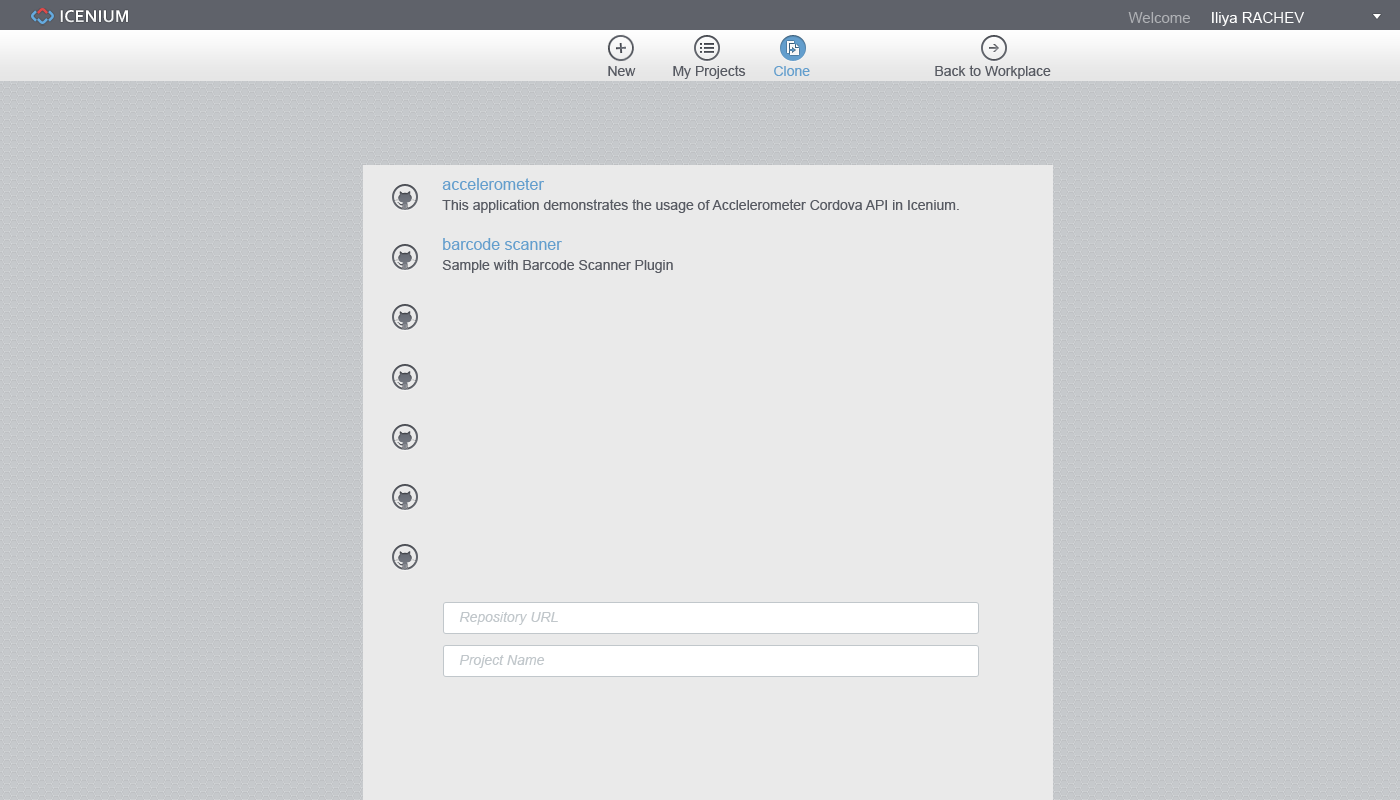
<style>
.page{position:relative;width:1400px;height:800px;background:#eaeaea}
.page>*{position:absolute;margin:0}
.t1{font:15px "ArialMT";color:#afb1b5}
.t2{font:15px "ArialMT";color:#ffffff}
.t3{font:14px "ArialMT";color:#575a62}
.t4{font:14px "ArialMT";color:#639ecd}
.t5{font:16px "ArialMT";color:#639ecd}
.t6{font:14px "Arial-ItalicMT";color:#c1c7cb}
</style>
<div class="page">
<p class="t1" style="left:1128px;top:12px;width:62px;height:11px">Welcome</p>
<p class="t2" style="left:1212px;top:12px;width:92px;height:14px">Iliya RACHEV</p>
<p class="t3" style="left:673px;top:65px;width:73px;height:14px">My Projects</p>
<p class="t3" style="left:935px;top:65px;width:116px;height:14px">Back to Workplace</p>
<p class="t3" style="left:608px;top:66px;width:28px;height:10px">New</p>
<p class="t4" style="left:774px;top:66px;width:36px;height:10px">Clone</p>
<p class="t5" style="left:442px;top:178px;width:102px;height:12px">accelerometer</p>
<p class="t3" style="left:442px;top:199px;width:517px;height:14px">This application demonstrates the usage of Acclelerometer Cordova API in Icenium.</p>
<p class="t5" style="left:443px;top:238px;width:119px;height:12px">barcode scanner</p>
<p class="t3" style="left:442px;top:259px;width:231px;height:14px">Sample with Barcode Scanner Plugin</p>
<p class="t6" style="left:459px;top:612px;width:99px;height:13px">Repository URL</p>
<p class="t6" style="left:459px;top:655px;width:86px;height:13px">Project Name</p>
</div>
